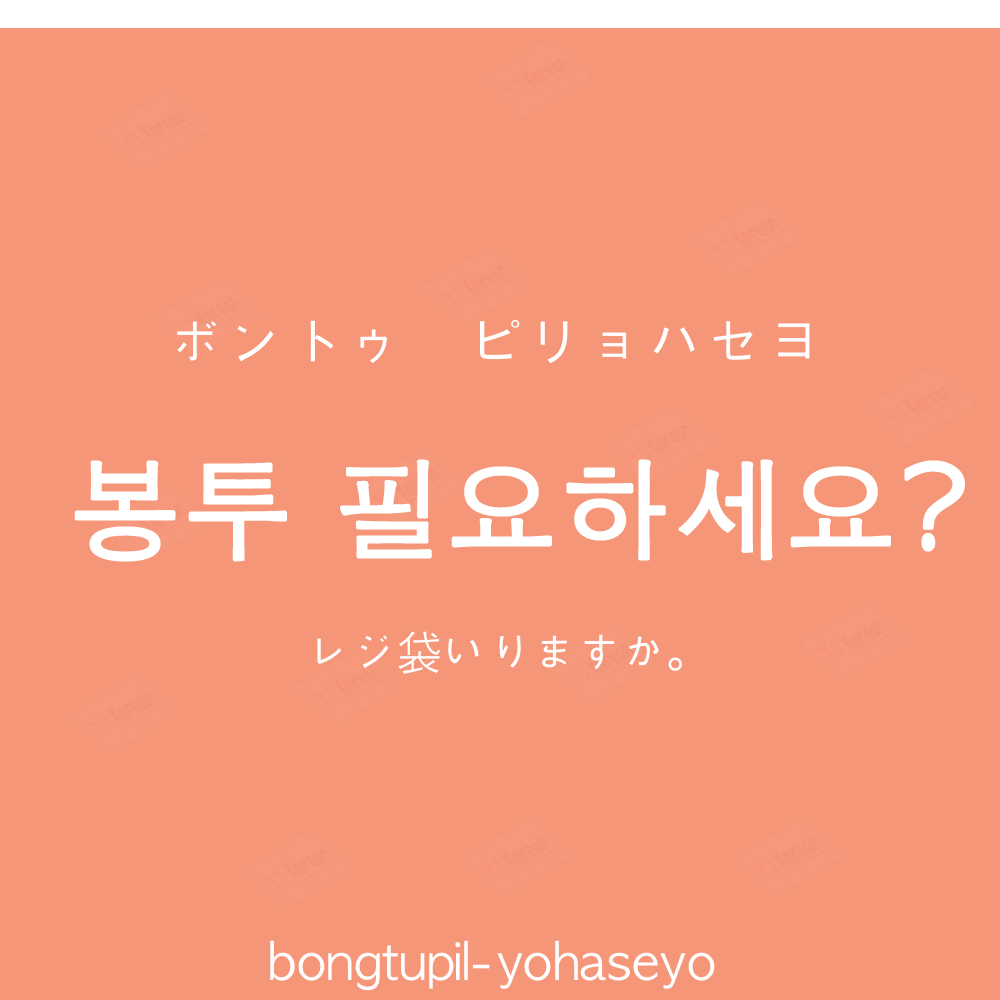
<style>
.page{position:relative;width:1000px;height:1000px;background:#f69679}
.page>*{position:absolute;margin:0}
.t1{font:60px "AppleGothic";color:#ffffff}
.t2{font:110px "AppleGothic";color:#ffffff;font-weight:bold}
.t3{font:45px "AppleGothic";color:#ffffff}
.t4{font:45px "HiraKakuProN-W3";color:#ffffff}
.t5{font:50px "AppleGothic";color:#ffffff}
</style>
<div class="page">
<p class="t1" style="left:177px;top:319px;width:633px;height:45px">ボントゥ　ピリョハセヨ</p>
<p class="t2" style="left:74px;top:459px;width:891px;height:103px">봉투 필요하세요?</p>
<p class="t3" style="left:317px;top:631px;width:365px;height:43px">レジ袋いりますか<span class="t4">。</span></p>
<p class="t5" style="left:270px;top:940px;width:445px;height:51px">bongtupil-yohaseyo</p>
</div>
